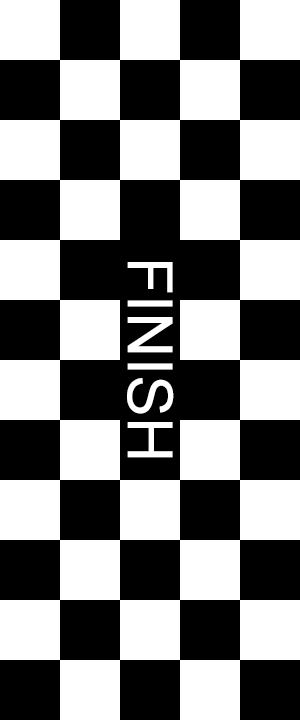
<style>
.page{position:relative;width:300px;height:720px;background:#000000}
.page>*{position:absolute;margin:0}
.t1{font:62.5px "ArialMT";color:#ffffff}
</style>
<div class="page">
<p class="t1" style="left:127px;top:262px;width:47px;height:196px;rotate:90deg">FINISH</p>
</div>
